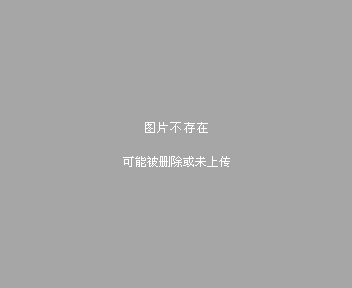
<style>
.page{position:relative;width:352px;height:288px;background:#a6a6a6}
.page>*{position:absolute;margin:0}
.t1{font:12px "SimSun";letter-spacing:0.1em;color:#ffffff}
.t2{font:12px "SimSun";color:#ffffff}
</style>
<div class="page">
<p class="t1" style="left:145px;top:122px;width:63px;height:11px">图片不存在</p>
<p class="t2" style="left:123px;top:156px;width:107px;height:11px">可能被删除或未上传</p>
</div>
